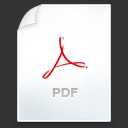
<style>
.page{position:relative;width:128px;height:128px;background:#333333}
.page>*{position:absolute;margin:0}
.t1{font:13px "HelveticaNeue-Bold";color:#cccccc}
</style>
<div class="page">
<p class="t1" style="left:52px;top:88px;width:26px;height:9px">PDF</p>
</div>
